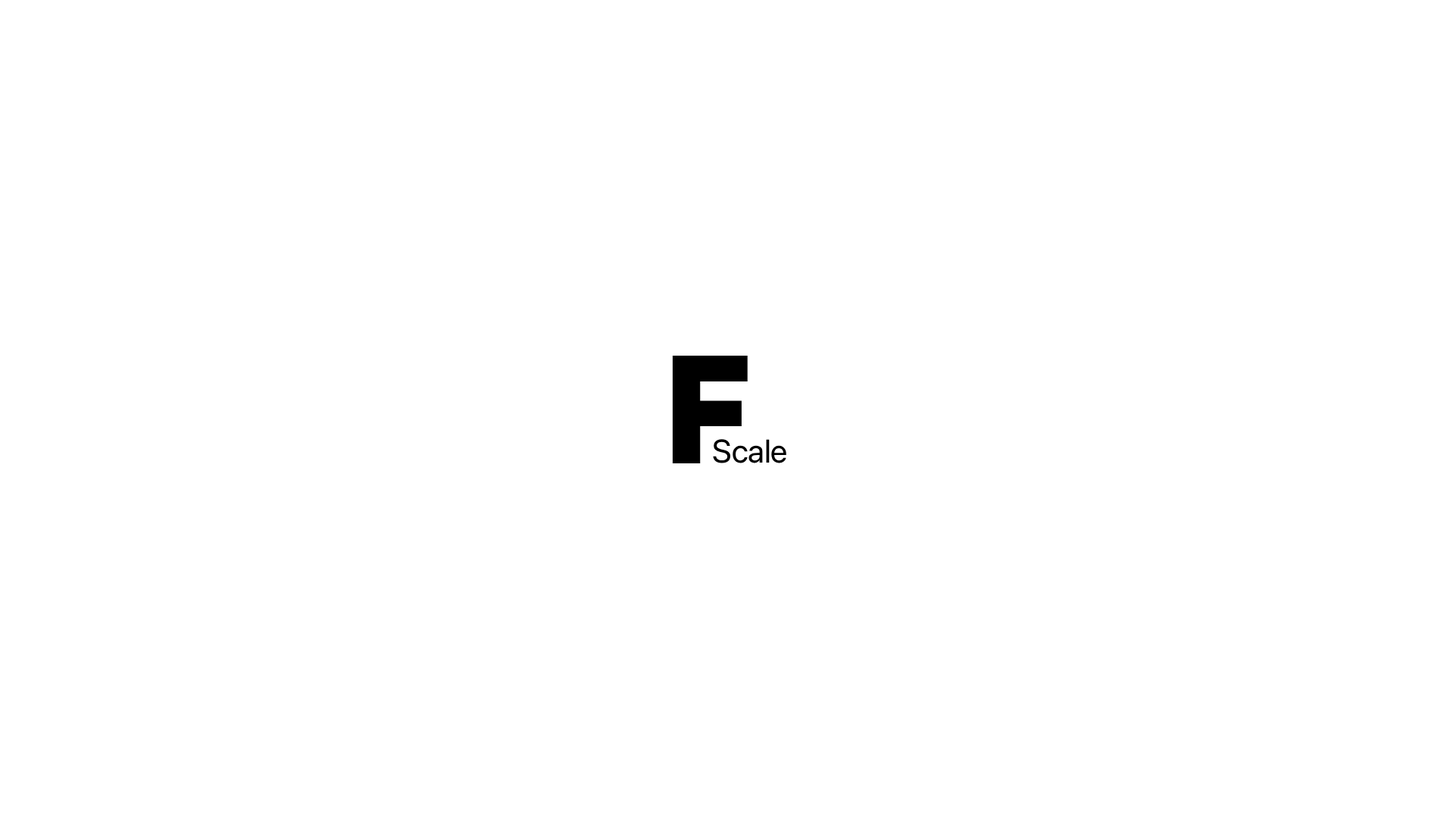
<style>
.page{position:relative;width:1456px;height:819px;background:#ffffff}
.page>*{position:absolute;margin:0}
.t1{font:151.7px "UniSansHeavyCAPS";color:#000000}
.t2{font:32.6px "SFPro-Regular";color:#000000}
</style>
<div class="page">
<p class="t1" style="left:673px;top:356px;width:75px;height:107px">F</p>
<p class="t2" style="left:713px;top:439px;width:73px;height:24px">Scale</p>
</div>
